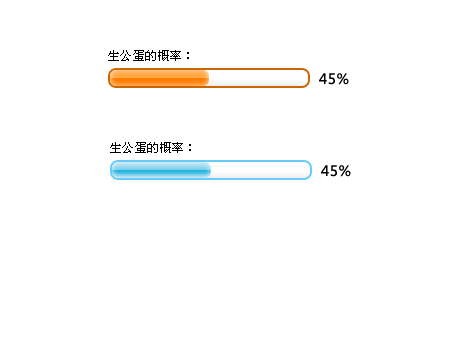
<style>
.page{position:relative;width:454px;height:340px;background:#ffffff}
.page>*{position:absolute;margin:0}
.t1{font:12px "SimSun";letter-spacing:0.04em;color:#000000}
.t2{font:14px "MicrosoftYaHei";letter-spacing:0.04em;color:#000000}
</style>
<div class="page">
<p class="t1" style="left:108px;top:50px;width:81px;height:11px">生公蛋的概率：</p>
<p class="t2" style="left:319px;top:73px;width:30px;height:12px">45%</p>
<p class="t1" style="left:110px;top:142px;width:81px;height:11px">生公蛋的概率：</p>
<p class="t2" style="left:321px;top:165px;width:30px;height:12px">45%</p>
</div>
